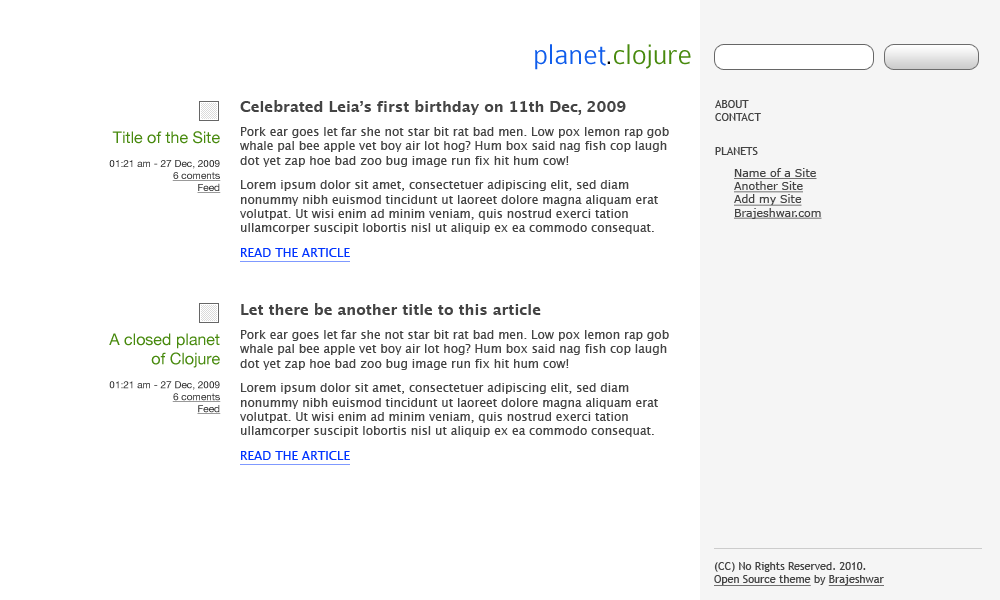
<style>
.page{position:relative;width:1000px;height:600px;background:#ffffff}
.page>*{position:absolute;margin:0}
.t1{font:30px "Colaborate-Light";color:#488a0e}
.t2{font:30px "Colaborate-Light";color:#105deb}
.t3{font:30px "Colaborate-Light";color:#000000}
.t4{font:12px "LucidaGrande";color:#444444}
.t5{font:15px "LucidaGrande-Bold";color:#444444}
.t6{font:12px "LucidaGrande";color:#0033ff;text-decoration:underline}
.t7{font:11px "TrebuchetMS";color:#444444}
.t8{font:10px "HelveticaNeue";color:#333333}
.t9{font:16px "HelveticaNeue";color:#488a0e}
.t10{font:10px "HelveticaNeue";color:#333333;text-decoration:underline}
.t11{font:11px "Verdana";color:#444444;text-decoration:underline}
.t12{font:11px "TrebuchetMS";color:#444444;text-decoration:underline}
</style>
<div class="page">
<p class="t1" style="left:535px;top:44px;width:156px;height:26px"><span class="t2">planet</span><span class="t3">.</span>clojure</p>
<p class="t4" style="left:240px;top:100px;width:429px;height:162px"><span class="t5">Celebrated Leia’s first birthday on 11th Dec, 2009<br></span>Pork ear goes let far she not star bit rat bad men. Low pox lemon rap gob whale pal bee apple vet boy air lot hog? Hum box said nag fish cop laugh dot yet zap hoe bad zoo bug image run fix hit hum cow!<br>Lorem ipsum dolor sit amet, consectetuer adipiscing elit, sed diam nonummy nibh euismod tincidunt ut laoreet dolore magna aliquam erat volutpat. Ut wisi enim ad minim veniam, quis nostrud exerci tation ullamcorper suscipit lobortis nisl ut aliquip ex ea commodo consequat.<br><span class="t6">READ THE ARTICLE</span></p>
<p class="t7" style="left:715px;top:100px;width:46px;height:21px">ABOUT<br>CONTACT</p>
<p class="t8" style="left:109px;top:131px;width:112px;height:62px;text-align:right"><span class="t9">Title of the Site<br></span><br>01:21 am - 27 Dec, 2009<br><span class="t10">6 coments<br>Feed</span></p>
<p class="t7" style="left:715px;top:147px;width:43px;height:8px">PLANETS</p>
<p class="t11" style="left:734px;top:168px;width:88px;height:51px">Name of a Site<br>Another Site<br>Add my Site<br>Brajeshwar.com</p>
<p class="t4" style="left:240px;top:303px;width:429px;height:162px"><span class="t5">Let there be another title to this article<br></span>Pork ear goes let far she not star bit rat bad men. Low pox lemon rap gob whale pal bee apple vet boy air lot hog? Hum box said nag fish cop laugh dot yet zap hoe bad zoo bug image run fix hit hum cow!<br>Lorem ipsum dolor sit amet, consectetuer adipiscing elit, sed diam nonummy nibh euismod tincidunt ut laoreet dolore magna aliquam erat volutpat. Ut wisi enim ad minim veniam, quis nostrud exerci tation ullamcorper suscipit lobortis nisl ut aliquip ex ea commodo consequat.<br><span class="t6">READ THE ARTICLE</span></p>
<p class="t9" style="left:109px;top:333px;width:112px;height:81px;text-align:right">A closed planet<br>of Clojure<br><span class="t8"><br>01:21 am - 27 Dec, 2009<br></span><span class="t10">6 coments<br>Feed</span></p>
<p class="t7" style="left:714px;top:562px;width:170px;height:24px">(CC) No Rights Reserved. 2010.<br><span class="t12">Open Source theme</span> by <span class="t12">Brajeshwar</span></p>
</div>
